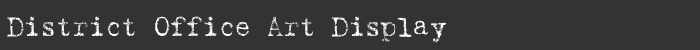
<style>
.page{position:relative;width:700px;height:50px;background:#333333}
.page>*{position:absolute;margin:0}
.t1{font:28px "Harting-Plain";letter-spacing:-0.025em;color:#ffffff}
</style>
<div class="page">
<p class="t1" style="left:7px;top:16px;width:440px;height:27px">District Office Art Display</p>
</div>
